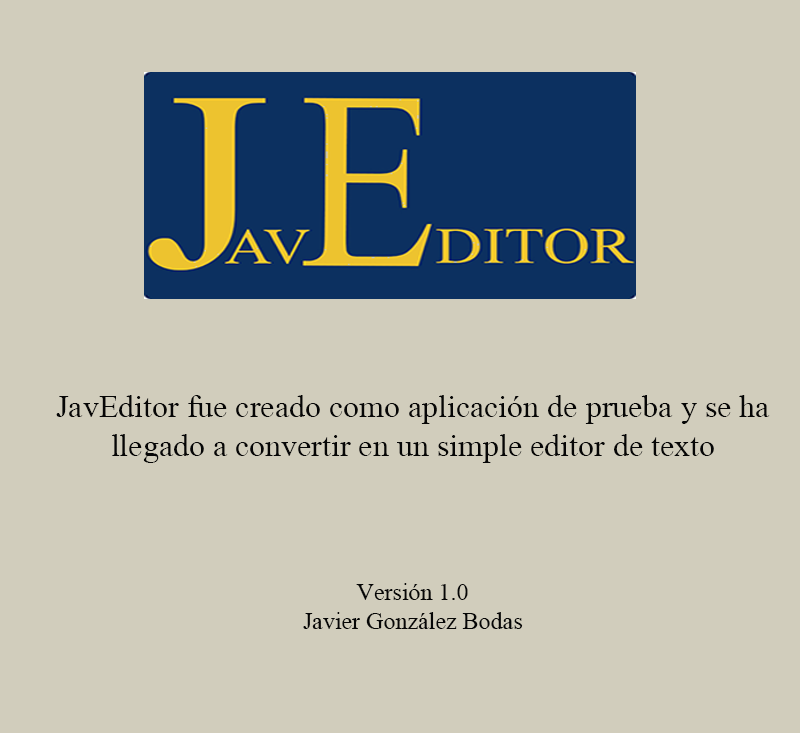
<style>
.page{position:relative;width:800px;height:733px;background:#d1cdbc}
.page>*{position:absolute;margin:0}
.t1{font:32px "MongolianBaiti";color:#060606}
.t2{font:24px "MongolianBaiti";color:#060606}
</style>
<div class="page">
<p class="t1" style="left:56px;top:395px;width:714px;height:234px;text-align:center">JavEditor fue creado como aplicación de prueba y se ha llegado a convertir en un simple editor de texto<br><br><br><br><span class="t2">Versión 1.0 <br>Javier González Bodas<br><br><br><br><br><br>Versión 1.0</span></p>
</div>
